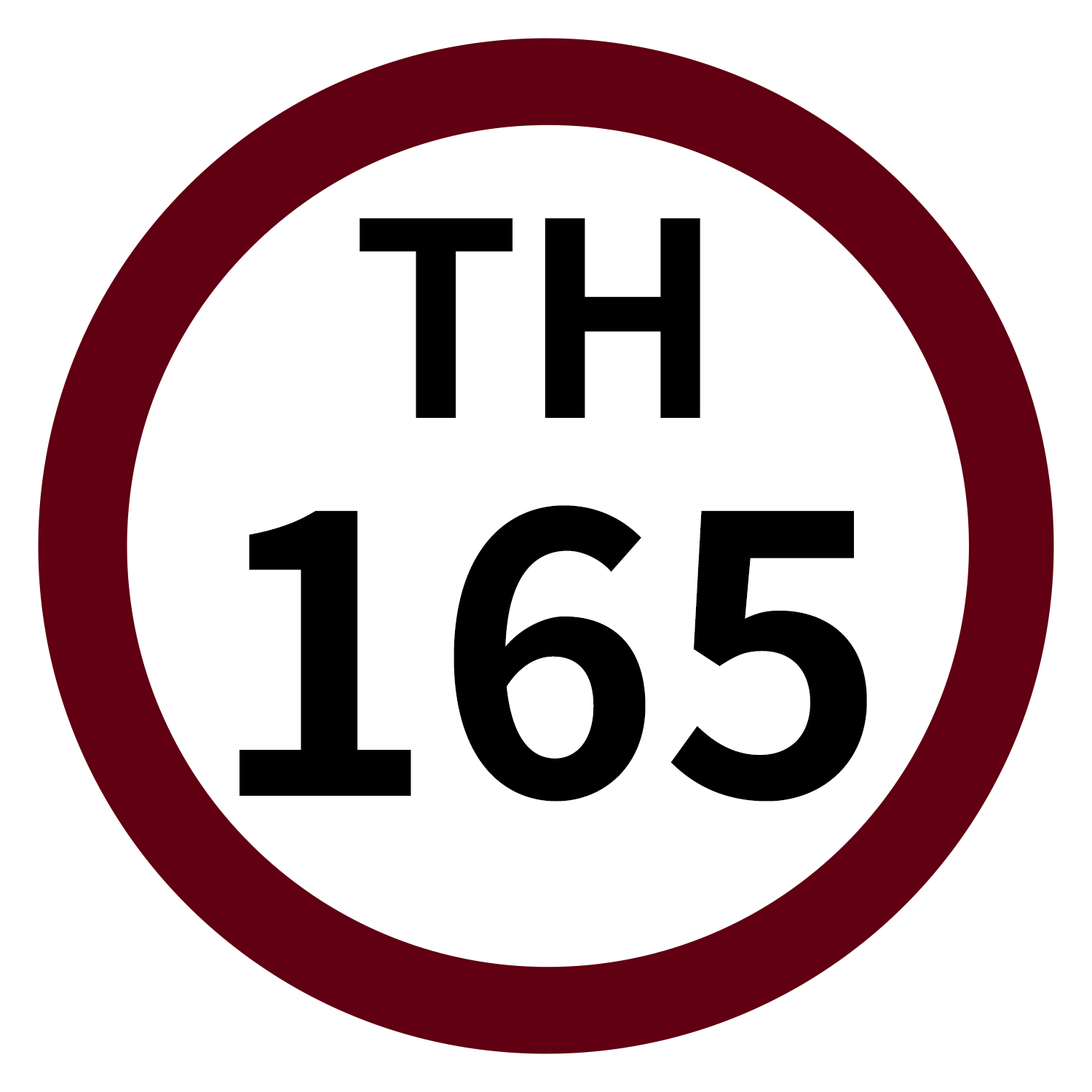
<style>
.page{position:relative;width:1092px;height:1092px;background:#ffffff}
.page>*{position:absolute;margin:0}
.t1{font:269.8px "NotoSansJP-Bold";color:#000000}
.t2{font:384.8px "NotoSansJP-Bold";color:#000000}
</style>
<div class="page">
<p class="t1" style="left:360px;top:218px;width:340px;height:200px">TH</p>
<p class="t2" style="left:240px;top:505px;width:627px;height:297px">165</p>
</div>
